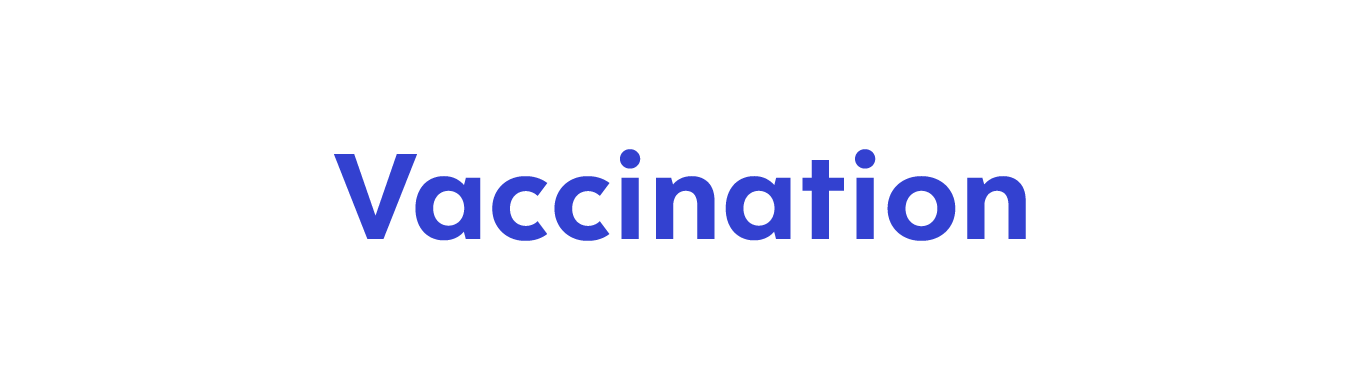
<style>
.page{position:relative;width:1360px;height:390px;background:#ffffff}
.page>*{position:absolute;margin:0}
.t1{font:130px "FONTSPRINGDEMO-ClarikaProGeometricBold";color:#3341d0}
</style>
<div class="page">
<p class="t1" style="left:334px;top:149px;width:692px;height:92px">Vaccination</p>
</div>
